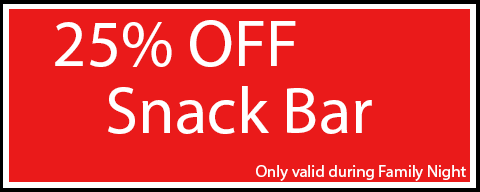
<style>
.page{position:relative;width:480px;height:192px;background:#ea1a1a}
.page>*{position:absolute;margin:0}
.t1{font:66.7px "MyriadPro-Regular";color:#ffffff}
.t2{font:12px "MyriadPro-Regular";color:#ffffff}
.t3{font:16.7px "MyriadPro-Regular";color:#ffffff}
</style>
<div class="page">
<p class="t1" style="left:55px;top:20px;width:241px;height:47px">25% OFF</p>
<p class="t2" style="left:108px;top:86px;width:264px;height:48px">Snack Bar</p>
<p class="t3" style="left:256px;top:165px;width:210px;height:16px">Only valid during Family Night</p>
</div>
